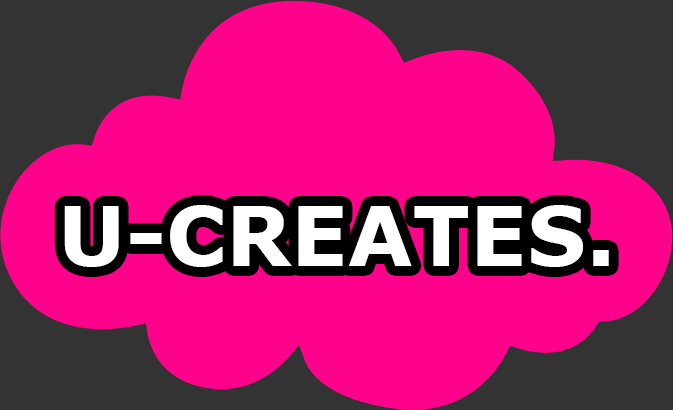
<style>
.page{position:relative;width:673px;height:410px;background:#ff028b}
.page>*{position:absolute;margin:0}
.t1{font:83.3px "Verdana-Bold";color:#ffffff}
</style>
<div class="page">
<p class="t1" style="left:64px;top:205px;width:545px;height:62px">U-CREATES.</p>
</div>
